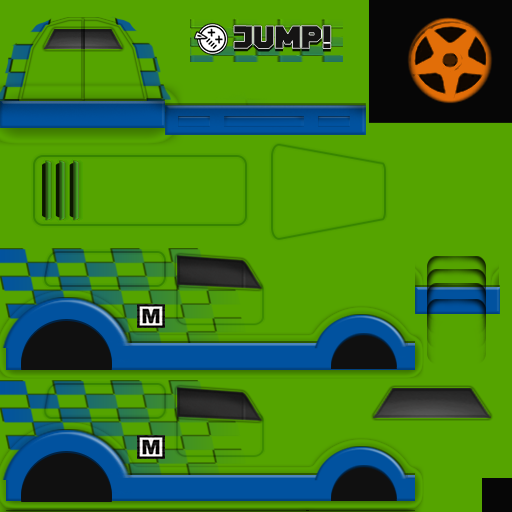
<style>
.page{position:relative;width:512px;height:512px;background:#55a400}
.page>*{position:absolute;margin:0}
.t1{font:32px "Inlanders-Bold";color:#131212;scale:1.12 1}
</style>
<div class="page">
<p class="t1" style="left:234px;top:25px;width:97px;height:24px">Jump!</p>
</div>
